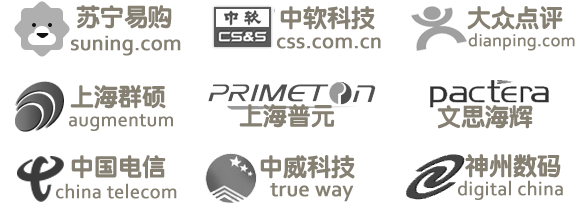
<style>
.page{position:relative;width:577px;height:203px;background:#ffffff}
.page>*{position:absolute;margin:0}
.t1{font:24px "YentiEG-Ultra-GB";color:#868073}
.t2{font:22px "Corbel";color:#868073;font-weight:bold}
.t3{font:18px "Corbel";color:#868073;font-weight:bold}
.t4{font:20px "Corbel";color:#868073;font-weight:bold}
</style>
<div class="page">
<p class="t1" style="left:76px;top:5px;width:96px;height:24px">苏宁易购</p>
<p class="t1" style="left:280px;top:6px;width:95px;height:24px">中软科技</p>
<p class="t1" style="left:467px;top:6px;width:96px;height:24px">大众点评</p>
<p class="t2" style="left:71px;top:35px;width:110px;height:21px">suning.com</p>
<p class="t2" style="left:277px;top:37px;width:104px;height:12px">css.com.cn</p>
<p class="t3" style="left:468px;top:33px;width:107px;height:18px">dianping.com</p>
<p class="t1" style="left:70px;top:85px;width:96px;height:24px">上海群硕</p>
<p class="t1" style="left:239px;top:104px;width:96px;height:24px">上海普元</p>
<p class="t1" style="left:437px;top:105px;width:96px;height:24px">文思海辉</p>
<p class="t4" style="left:69px;top:114px;width:104px;height:17px">augmentum</p>
<p class="t1" style="left:71px;top:155px;width:95px;height:24px">中国电信</p>
<p class="t1" style="left:260px;top:155px;width:95px;height:24px">中威科技</p>
<p class="t1" style="left:465px;top:154px;width:96px;height:24px">神州数码</p>
<p class="t4" style="left:56px;top:183px;width:121px;height:16px">china telecom</p>
<p class="t2" style="left:270px;top:183px;width:84px;height:19px">true way</p>
<p class="t4" style="left:458px;top:180px;width:105px;height:20px">digital china</p>
</div>
